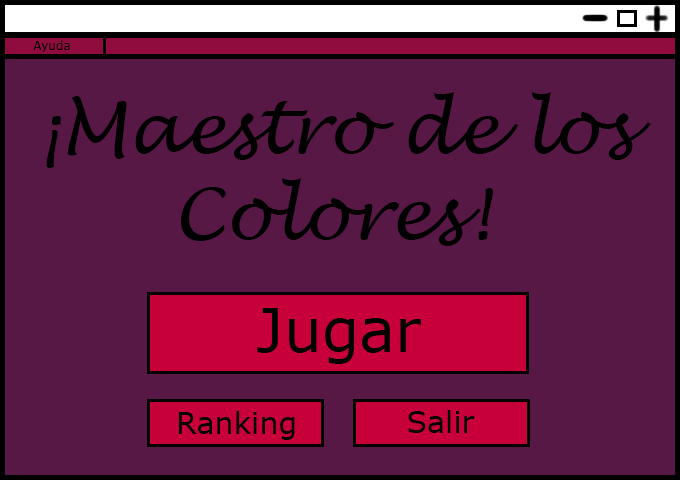
<style>
.page{position:relative;width:680px;height:480px;background:#581845}
.page>*{position:absolute;margin:0}
.t1{font:12px "Verdana";color:#000000}
.t2{font:72px "LucidaHandwriting-Italic";color:#000000}
.t3{font:60px "Verdana";color:#000000}
.t4{font:30px "Verdana";color:#000000}
</style>
<div class="page">
<p class="t1" style="left:33px;top:40px;width:37px;height:12px">Ayuda</p>
<p class="t2" style="left:46px;top:92px;width:605px;height:154px;text-align:center">¡Maestro de los Colores!</p>
<p class="t3" style="left:257px;top:308px;width:164px;height:56px">Jugar</p>
<p class="t4" style="left:178px;top:411px;width:117px;height:29px">Ranking</p>
<p class="t4" style="left:408px;top:410px;width:67px;height:23px">Salir</p>
</div>
